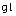
<style>
.page{position:relative;width:16px;height:16px;background:#ffffff}
.page>*{position:absolute;margin:0}
.t1{font:10px "Monaco";color:#000000}
</style>
<div class="page">
<p class="t1" style="left:2px;top:3px;width:10px;height:10px">gl</p>
</div>
